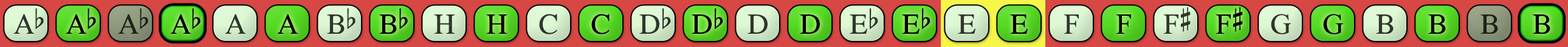
<style>
.page{position:relative;width:1568px;height:47px}
.page>*{position:absolute;margin:0}
.t1{font:29.2px "OpusChords";letter-spacing:-0.05em;color:#2f352d}
.t2{font:29.2px "OpusChords";letter-spacing:-0.05em;color:#000000}
.t3{font:29.2px "OpusChords";letter-spacing:-0.05em;color:#1e211b}
.t4{font:29.2px "OpusChords";color:#2f352d}
.t5{font:29.2px "OpusChords";color:#000000}
.t6{font:29.2px "OpusChords";color:#30352d}
.t7{font:29.2px "OpusChords";color:#30362e}
.t8{font:29.2px "OpusChords";color:#1f211b}
</style>
<div class="page">
<p class="t1" style="left:13px;top:9px;width:31px;height:25px">Ab</p>
<p class="t2" style="left:66px;top:9px;width:30px;height:25px">Ab</p>
<p class="t3" style="left:118px;top:9px;width:30px;height:25px">Ab</p>
<p class="t2" style="left:170px;top:9px;width:31px;height:25px">Ab</p>
<p class="t4" style="left:225px;top:14px;width:21px;height:20px">A</p>
<p class="t5" style="left:277px;top:14px;width:21px;height:20px">A</p>
<p class="t6" style="left:327px;top:9px;width:29px;height:25px">Bb</p>
<p class="t5" style="left:379px;top:9px;width:29px;height:25px">Bb</p>
<p class="t6" style="left:434px;top:15px;width:21px;height:19px">H</p>
<p class="t5" style="left:486px;top:15px;width:21px;height:19px">H</p>
<p class="t7" style="left:539px;top:14px;width:18px;height:21px">C</p>
<p class="t5" style="left:591px;top:14px;width:19px;height:21px">C</p>
<p class="t4" style="left:639px;top:9px;width:32px;height:25px">Db</p>
<p class="t5" style="left:692px;top:9px;width:31px;height:25px">Db</p>
<p class="t4" style="left:748px;top:15px;width:20px;height:19px">D</p>
<p class="t5" style="left:800px;top:15px;width:20px;height:19px">D</p>
<p class="t6" style="left:850px;top:9px;width:28px;height:25px">Eb</p>
<p class="t5" style="left:902px;top:9px;width:28px;height:25px">Eb</p>
<p class="t7" style="left:958px;top:15px;width:17px;height:19px">E</p>
<p class="t5" style="left:1010px;top:15px;width:18px;height:19px">E</p>
<p class="t7" style="left:1064px;top:15px;width:15px;height:19px">F</p>
<p class="t5" style="left:1116px;top:15px;width:15px;height:19px">F</p>
<p class="t6" style="left:1163px;top:7px;width:28px;height:27px">F#</p>
<p class="t5" style="left:1216px;top:7px;width:27px;height:27px">F#</p>
<p class="t4" style="left:1271px;top:14px;width:20px;height:21px">G</p>
<p class="t5" style="left:1323px;top:14px;width:20px;height:21px">G</p>
<p class="t6" style="left:1376px;top:15px;width:18px;height:19px">B</p>
<p class="t5" style="left:1428px;top:15px;width:18px;height:19px">B</p>
<p class="t8" style="left:1480px;top:15px;width:18px;height:19px">B</p>
<p class="t5" style="left:1533px;top:15px;width:17px;height:19px">B</p>
</div>
